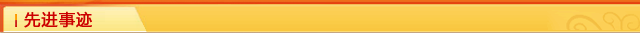
<style>
.page{position:relative;width:640px;height:33px}
.page>*{position:absolute;margin:0}
.t1{font:16px "MicrosoftYaHei";letter-spacing:0.05em;color:#cc0000;font-weight:bold}
</style>
<div class="page">
<p class="t1" style="left:24px;top:11px;width:68px;height:17px">先进事迹</p>
</div>
